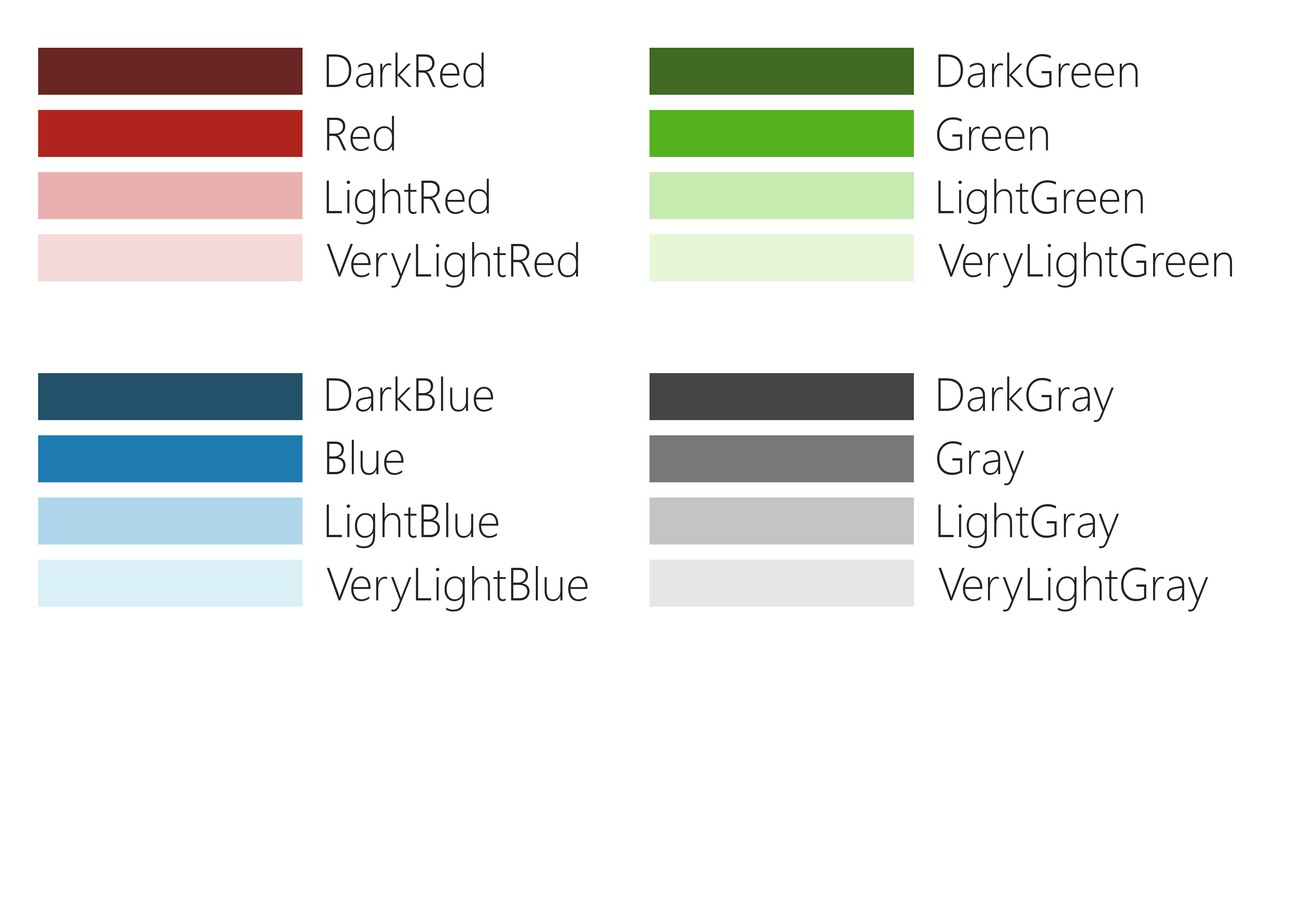
<style>
.page{position:relative;width:1299px;height:918px;background:#ffffff}
.page>*{position:absolute;margin:0}
.t1{font:46.3px "SegoeUI-Light";color:#22241f}
</style>
<div class="page">
<p class="t1" style="left:327px;top:53px;width:157px;height:35px">DarkRed</p>
<p class="t1" style="left:938px;top:53px;width:200px;height:35px">DarkGreen</p>
<p class="t1" style="left:327px;top:116px;width:67px;height:35px">Red</p>
<p class="t1" style="left:937px;top:117px;width:111px;height:34px">Green</p>
<p class="t1" style="left:327px;top:179px;width:162px;height:45px">LightRed</p>
<p class="t1" style="left:938px;top:179px;width:205px;height:45px">LightGreen</p>
<p class="t1" style="left:327px;top:242px;width:251px;height:46px">VeryLightRed</p>
<p class="t1" style="left:938px;top:242px;width:294px;height:46px">VeryLightGreen</p>
<p class="t1" style="left:327px;top:377px;width:166px;height:35px">DarkBlue</p>
<p class="t1" style="left:938px;top:377px;width:176px;height:45px">DarkGray</p>
<p class="t1" style="left:327px;top:440px;width:77px;height:35px">Blue</p>
<p class="t1" style="left:937px;top:441px;width:87px;height:44px">Gray</p>
<p class="t1" style="left:327px;top:503px;width:171px;height:45px">LightBlue</p>
<p class="t1" style="left:938px;top:503px;width:181px;height:45px">LightGray</p>
<p class="t1" style="left:327px;top:566px;width:261px;height:46px">VeryLightBlue</p>
<p class="t1" style="left:938px;top:566px;width:270px;height:46px">VeryLightGray</p>
</div>
